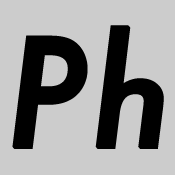
<style>
.page{position:relative;width:175px;height:175px;background:#cccccc}
.page>*{position:absolute;margin:0}
.t1{font:145px "Futura-MediumItalic";color:#000000;font-weight:bold}
</style>
<div class="page">
<p class="t1" style="left:12px;top:25px;width:152px;height:124px">Ph</p>
</div>
